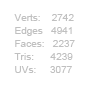
<style>
.page{position:relative;width:90px;height:90px;background:#ffffff}
.page>*{position:absolute;margin:0}
.t1{font:10px/13px "ArialMT";color:#c0c0c0}
</style>
<div class="page">
<p class="t1" style="left:14px;top:14px;width:61px;height:59px">Verts:    2742<br>Edges   4941<br>Faces:   2237<br>Tris:      4239<br>UVs:     3077</p>
</div>
